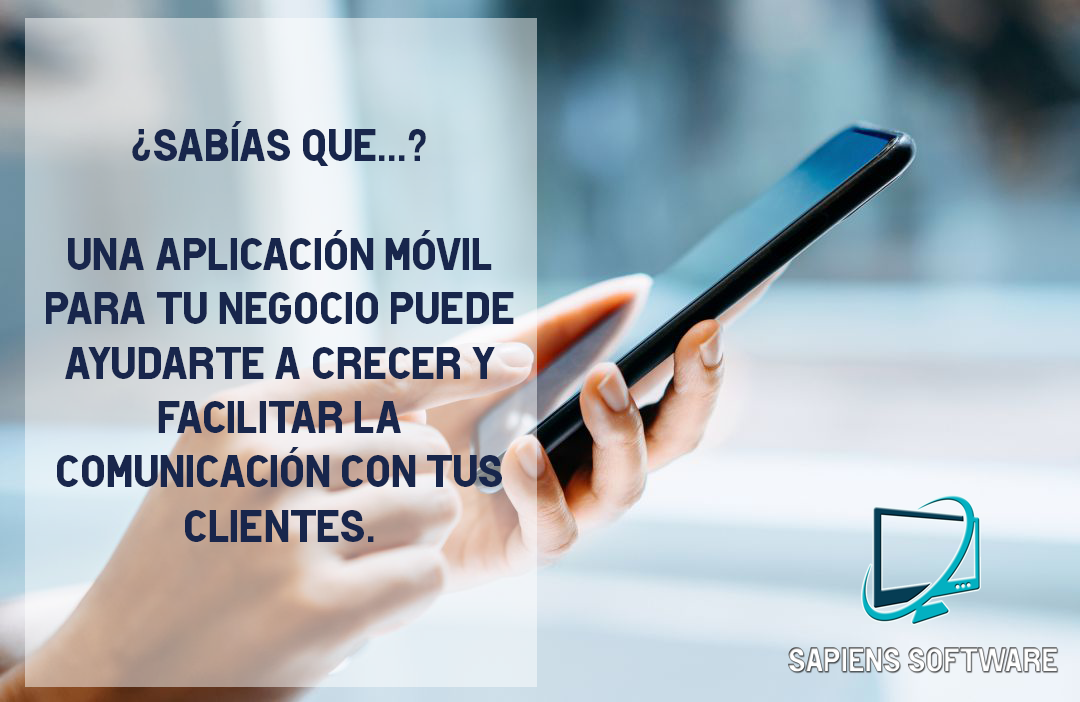
<style>
.page{position:relative;width:1080px;height:702px}
.page>*{position:absolute;margin:0}
.t1{font:45.3px "HotelDeParisXe";color:#18264c}
</style>
<div class="page">
<p class="t1" style="left:46px;top:121px;width:468px;height:421px;text-align:center">¿Sabías que...?<br><br>Una aplicación Móvil para tu negocio puede ayudarte a crecer y facilitar la comunicación con tus clientes.</p>
</div>
